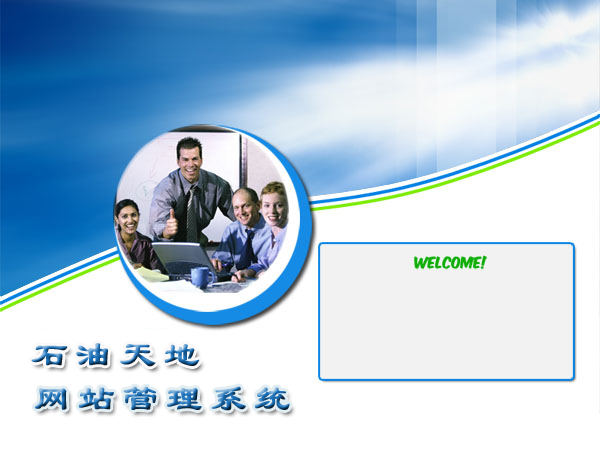
<style>
.page{position:relative;width:600px;height:450px;background:#ffffff}
.page>*{position:absolute;margin:0}
.t1{font:36px "LiSu";letter-spacing:0.2em;font-weight:bold}
</style>
<div class="page">
<p class="t1" style="left:31px;top:343px;width:169px;height:24px">石油天地</p>
<p class="t1" style="left:34px;top:386px;width:256px;height:25px">网站管理系统</p>
</div>
